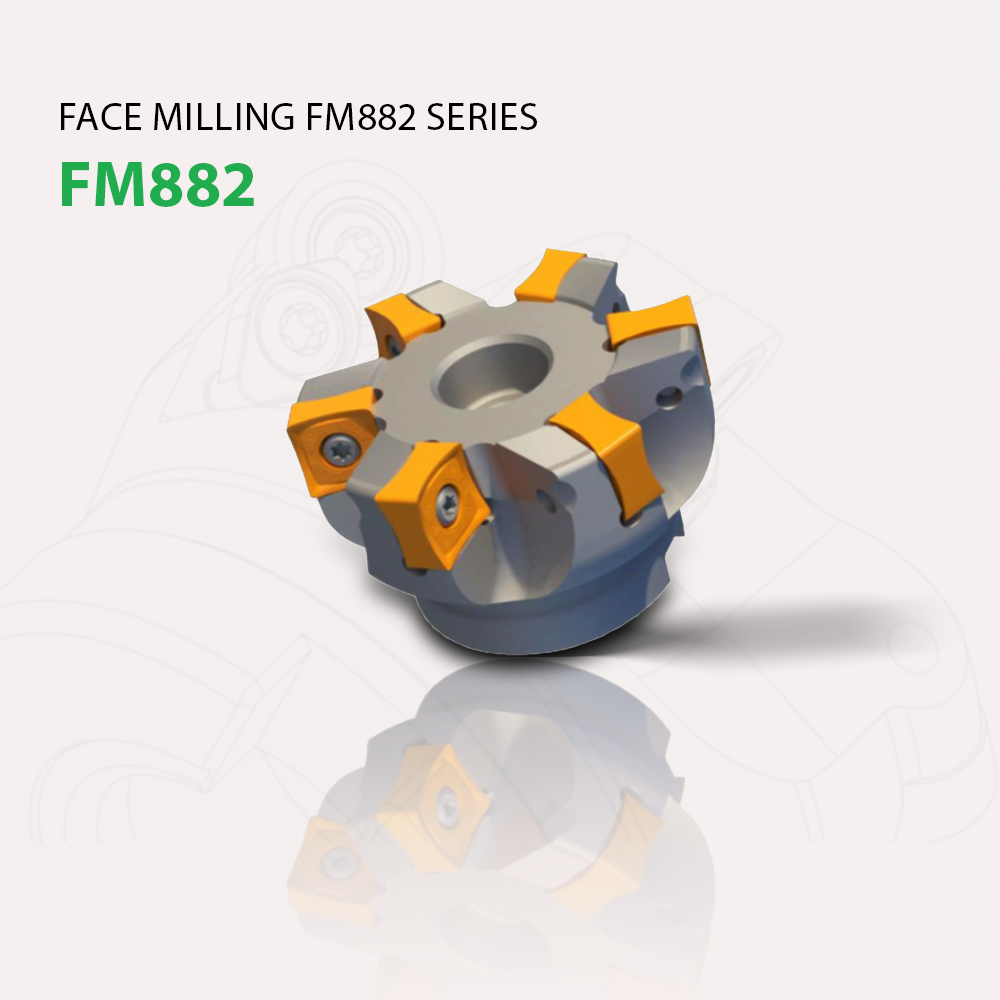
<style>
.page{position:relative;width:1000px;height:1000px;background:#f5efef}
.page>*{position:absolute;margin:0}
.t1{font:39.5px "MyriadPro-Regular";color:#000000;text-transform:uppercase}
.t2{font:65.4px "MyriadPro-Bold";color:#21ad4f;text-transform:uppercase}
</style>
<div class="page">
<p class="t1" style="left:61px;top:103px;width:476px;height:27px">Face milling FM882 series</p>
<p class="t2" style="left:62px;top:162px;width:192px;height:45px">FM882</p>
</div>
